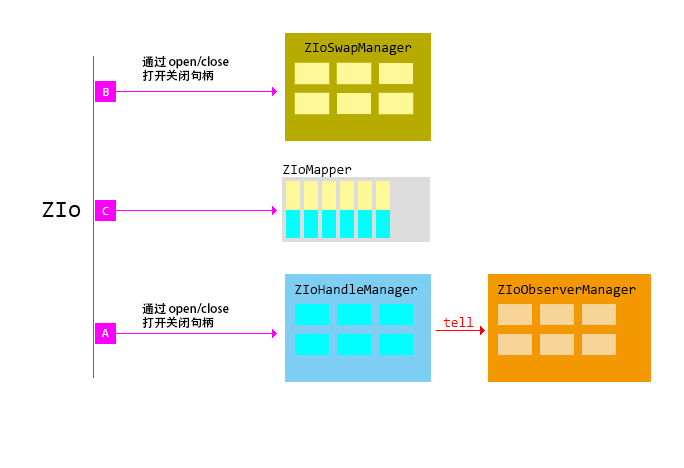
<style>
.page{position:relative;width:684px;height:468px;background:#ffffff}
.page>*{position:absolute;margin:0}
.t1{font:14px "Consolas";color:#000000}
.t2{font:12px "AdobeHeitiStd-Regular";color:#000000}
.t3{font:12px "Consolas";color:#ffffff}
.t4{font:24px "Consolas";color:#000000}
.t5{font:14px "Consolas";color:#ff0000}
</style>
<div class="page">
<p class="t1" style="left:304px;top:43px;width:108px;height:12px">ZIoSwapManager</p>
<p class="t2" style="left:142px;top:56px;width:87px;height:25px">通过 open/close <br>打开关闭句柄</p>
<p class="t3" style="left:103px;top:88px;width:6px;height:8px">B</p>
<p class="t1" style="left:283px;top:165px;width:69px;height:12px">ZIoMapper</p>
<p class="t4" style="left:42px;top:202px;width:39px;height:15px">ZIo</p>
<p class="t3" style="left:102px;top:207px;width:7px;height:8px">C</p>
<p class="t1" style="left:295px;top:284px;width:123px;height:13px">ZIoHandleManager</p>
<p class="t1" style="left:498px;top:284px;width:138px;height:13px">ZIoObserverManager</p>
<p class="t2" style="left:142px;top:303px;width:87px;height:25px">通过 open/close <br>打开关闭句柄</p>
<p class="t5" style="left:443px;top:317px;width:31px;height:10px">tell</p>
<p class="t3" style="left:102px;top:329px;width:7px;height:8px">A</p>
</div>
